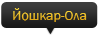
<style>
.page{position:relative;width:99px;height:37px;background:#ffffff}
.page>*{position:absolute;margin:0}
.t1{font:14px "FranklinGothic-Book";color:#e8b825}
</style>
<div class="page">
<p class="t1" style="left:13px;top:8px;width:74px;height:14px">Йошкар-Ола</p>
</div>
